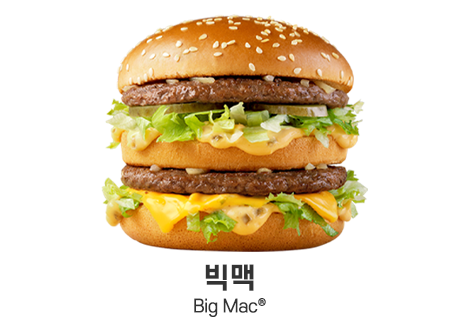
<style>
.page{position:relative;width:460px;height:330px;background:#ffffff}
.page>*{position:absolute;margin:0}
.t1{font:17.5px/24px "S-CoreDream-4Regular";letter-spacing:-0.02em;color:#333333}
.t2{font:28px/24px "S-CoreDream-6Bold";letter-spacing:-0.02em;color:#333333}
</style>
<div class="page">
<p class="t1" style="left:194px;top:264px;width:72px;height:53px;text-align:center"><span class="t2">빅맥<br></span>Big Mac®</p>
</div>
